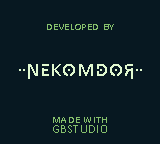
<style>
.page{position:relative;width:160px;height:144px;background:#071821}
.page>*{position:absolute;margin:0}
.t1{font:12px "Calibri";letter-spacing:0.02em;color:#86c06c;font-variant:small-caps}
.t2{font:12px/10px "Calibri";letter-spacing:0.02em;color:#86c06c;font-variant:small-caps}
</style>
<div class="page">
<p class="t1" style="left:47px;top:24px;width:67px;height:6px">developed by</p>
<p class="t2" style="left:53px;top:117px;width:54px;height:16px;text-align:center">made with<br>GBSTUDIO</p>
</div>
